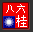
<style>
.page{position:relative;width:33px;height:32px;background:#f20000}
.page>*{position:absolute;margin:0}
.t1{font:10.4px "SimSun";color:#ffffff}
.t2{font:11.7px "SimSun";color:#ffffff}
</style>
<div class="page">
<p class="t1" style="left:6px;top:4px;width:19px;height:9px">八六</p>
<p class="t2" style="left:16px;top:15px;width:11px;height:12px">桂</p>
</div>
